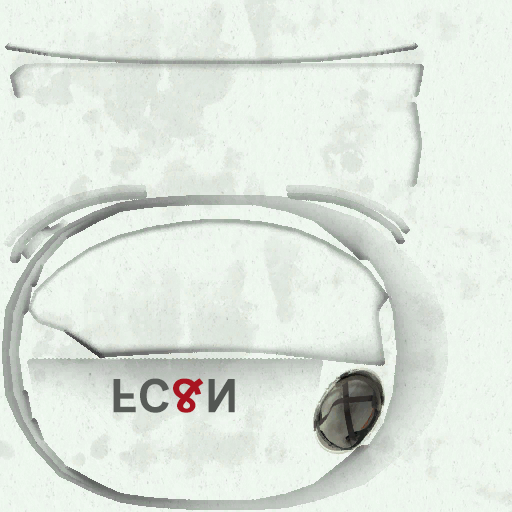
<style>
.page{position:relative;width:512px;height:512px}
.page>*{position:absolute;margin:0}
.t1{font:46.2px "Arial-BoldMT";color:#585c58}
.t2{font:46.2px "Arial-BoldMT";color:#a81420}
.t3{font:46.2px "Arial-BoldMT";color:#535753}
</style>
<div class="page">
<p class="t1" style="left:113px;top:378px;width:122px;height:35px">FC<span class="t2">&amp;</span><span class="t3">N</span></p>
</div>
